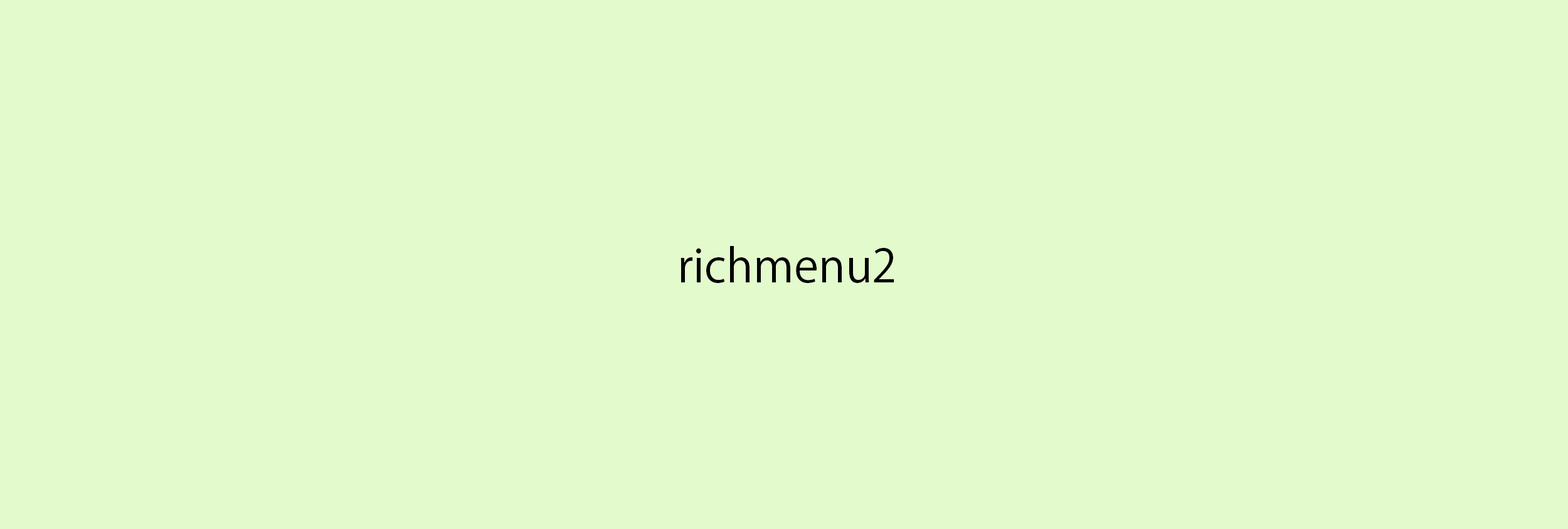
<style>
.page{position:relative;width:1568px;height:529px;background:#e3facc}
.page>*{position:absolute;margin:0}
.t1{font:45.2px "KozGoPr6N-Regular";color:#000000}
</style>
<div class="page">
<p class="t1" style="left:681px;top:246px;width:213px;height:37px">richmenu2</p>
</div>
